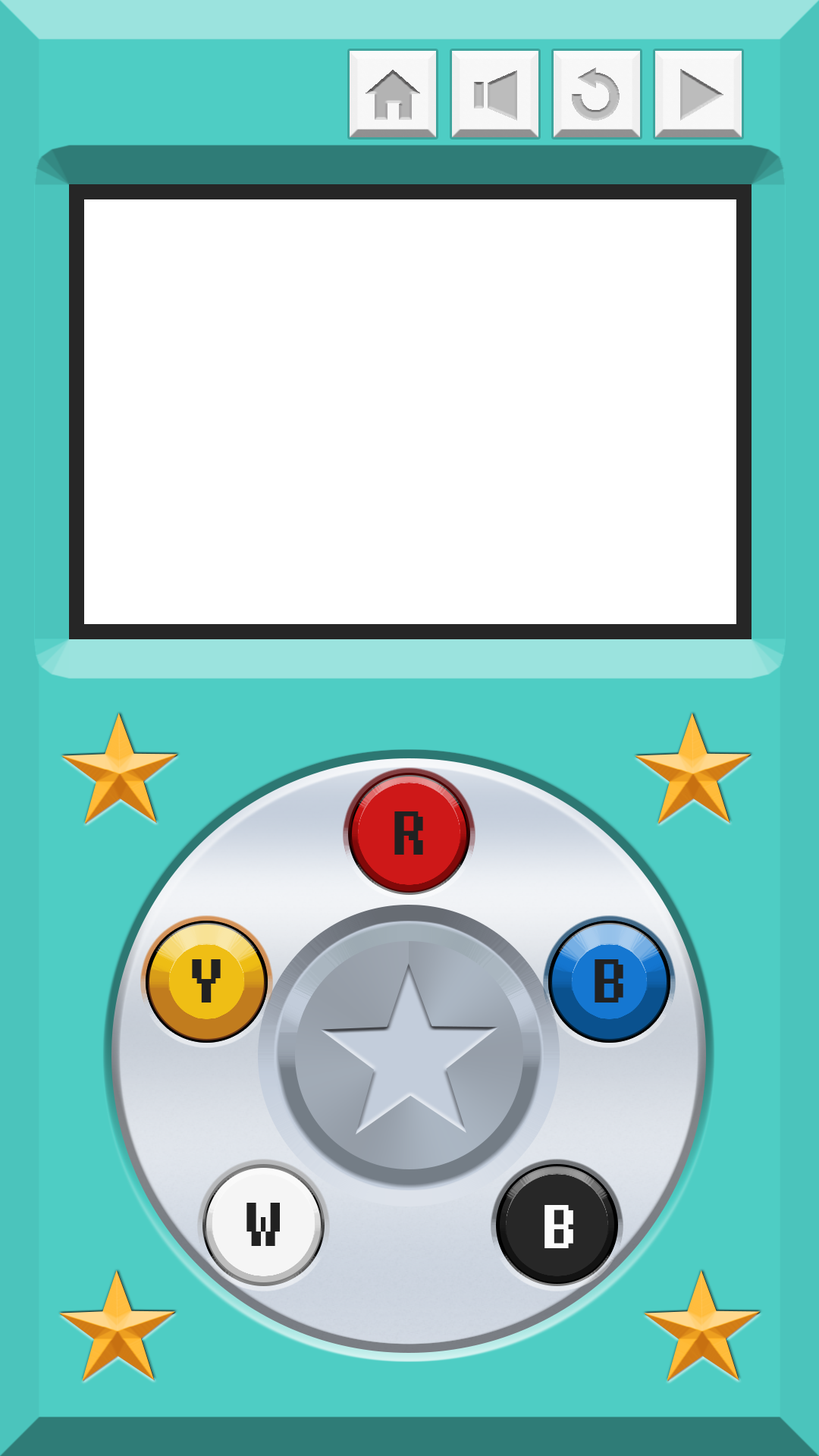
<style>
.page{position:relative;width:819px;height:1456px;background:#ffffff}
.page>*{position:absolute;margin:0}
.t1{font:75.8px "DungGeunMo";color:#212121}
.t2{font:75.8px "DungGeunMo";color:#fbfbfb}
</style>
<div class="page">
<p class="t1" style="left:394px;top:811px;width:29px;height:44px">R</p>
<p class="t1" style="left:192px;top:959px;width:29px;height:44px">Y</p>
<p class="t1" style="left:595px;top:959px;width:28px;height:44px">B</p>
<p class="t1" style="left:246px;top:1203px;width:34px;height:43px">W</p>
<p class="t2" style="left:544px;top:1205px;width:29px;height:43px">B</p>
</div>
